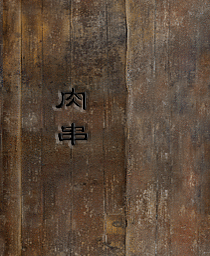
<style>
.page{position:relative;width:210px;height:256px}
.page>*{position:absolute;margin:0}
.t1{font:36px "Á¥Êé-Regular";color:#000000}
</style>
<div class="page">
<p class="t1" style="left:55px;top:87px;width:34px;height:59px">肉串</p>
</div>
